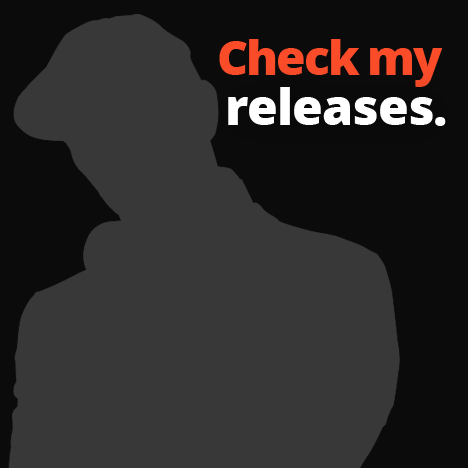
<style>
.page{position:relative;width:468px;height:468px;background:#383838}
.page>*{position:absolute;margin:0}
.t1{font:48.4px "OpenSans-Extrabold";letter-spacing:-0.05em;color:#fa4c29}
.t2{font:50.4px "OpenSans-Extrabold";letter-spacing:-0.025em;color:#ffffff}
</style>
<div class="page">
<p class="t1" style="left:219px;top:39px;width:224px;height:48px">Check my</p>
<p class="t2" style="left:228px;top:87px;width:218px;height:39px">releases.</p>
</div>
